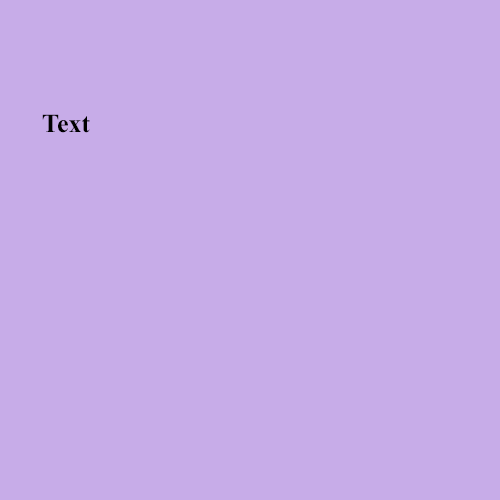
<style>
.page{position:relative;width:500px;height:500px;background:#c7ace8}
.page>*{position:absolute;margin:0}
.t1{font:25.8px "TimesNewRomanPS-BoldMT";color:#000000}
</style>
<div class="page">
<p class="t1" style="left:42px;top:114px;width:48px;height:19px">Text</p>
</div>
